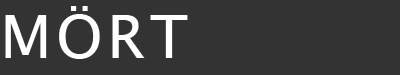
<style>
.page{position:relative;width:400px;height:75px;background:#333333}
.page>*{position:absolute;margin:0}
.t1{font:60px "LucidaSansUnicode";letter-spacing:0.075em;color:#ffffff}
</style>
<div class="page">
<p class="t1" style="left:5px;top:6px;width:183px;height:53px">MÖRT</p>
</div>
